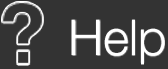
<style>
.page{position:relative;width:168px;height:69px;background:#333333}
.page>*{position:absolute;margin:0}
.t1{font:49.5px "HelveticaNeueLTCom-Lt";color:#ffffff}
</style>
<div class="page">
<p class="t1" style="left:71px;top:19px;width:94px;height:46px">Help</p>
</div>
